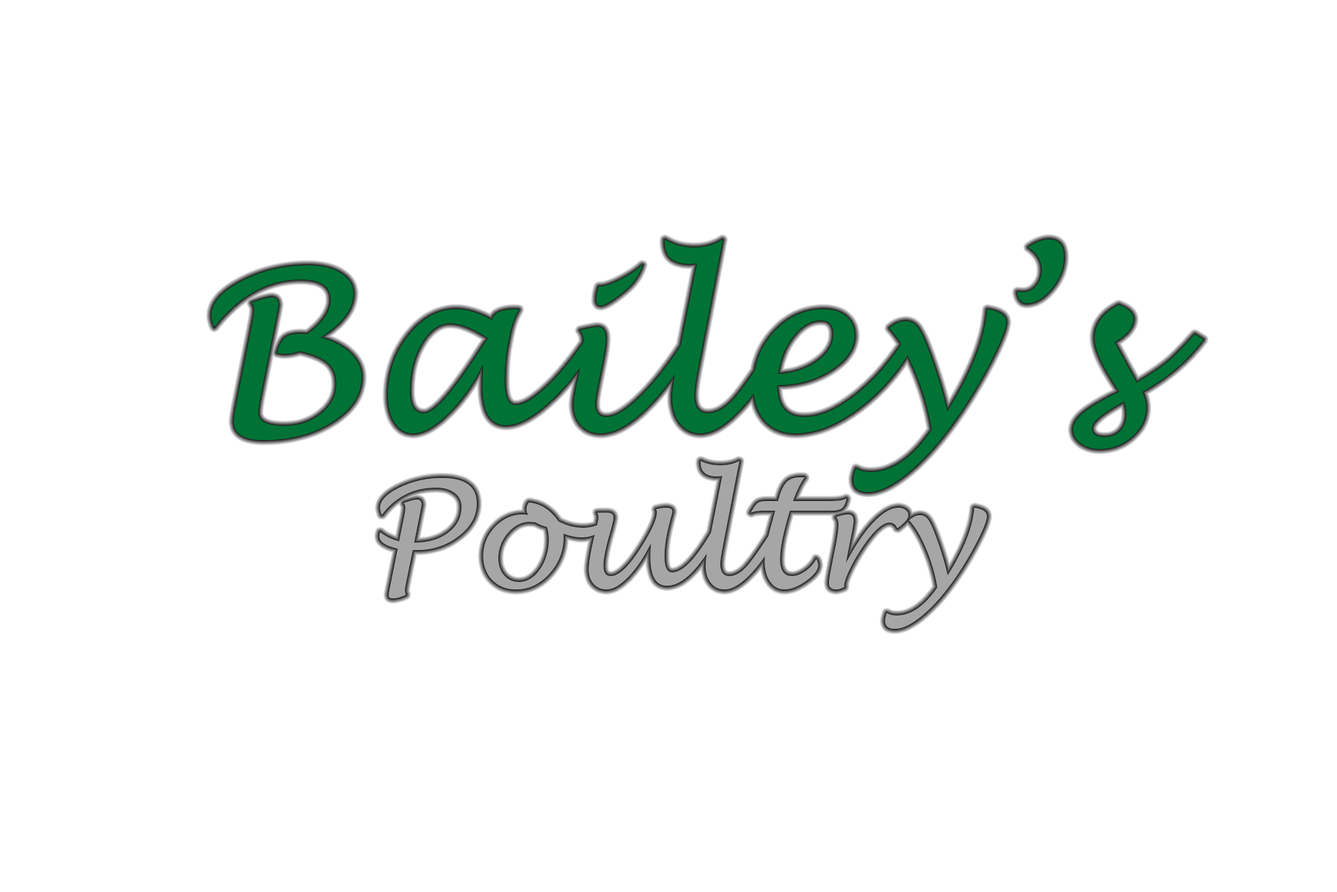
<style>
.page{position:relative;width:1337px;height:892px;background:#ffffff}
.page>*{position:absolute;margin:0}
.t1{font:222.9px "LucidaHandwriting-Italic";color:#007235}
.t2{font:148.6px "LucidaHandwriting-Italic";color:#a6a6a6}
</style>
<div class="page">
<p class="t1" style="left:211px;top:239px;width:993px;height:253px">Bailey’s</p>
<p class="t2" style="left:379px;top:461px;width:608px;height:168px">Poultry</p>
</div>
